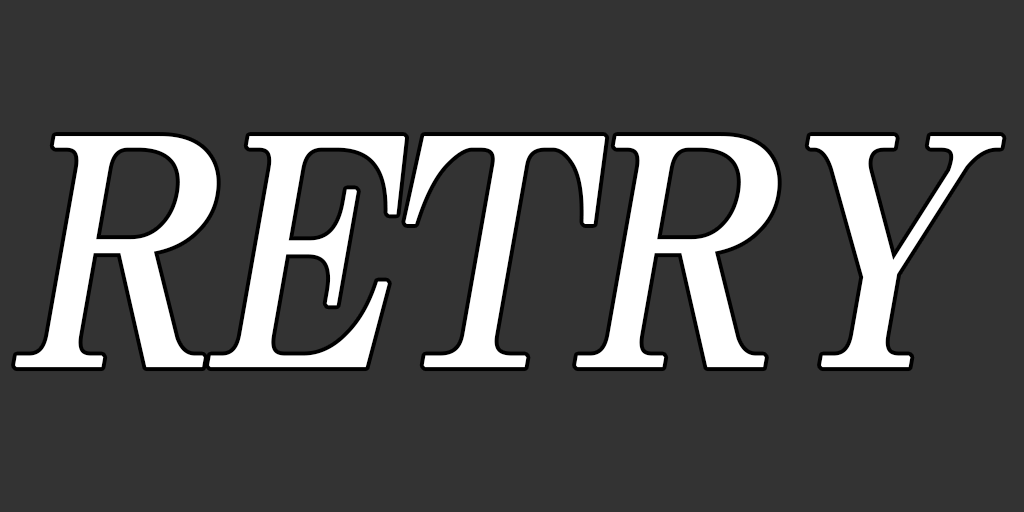
<style>
.page{position:relative;width:1024px;height:512px;background:#333333}
.page>*{position:absolute;margin:0}
.t1{font:310.4px "HGSMinchoB";letter-spacing:-0.07em;color:#ffffff;font-weight:bold;font-style:italic}
</style>
<div class="page">
<p class="t1" style="left:15px;top:136px;width:988px;height:232px">RETRY</p>
</div>
